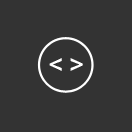
<style>
.page{position:relative;width:132px;height:132px;background:#333333}
.page>*{position:absolute;margin:0}
.t1{font:25.6px "HelveticaNeue-Medium";color:#ffffff;scale:0.94 1}
</style>
<div class="page">
<p class="t1" style="left:49px;top:58px;width:34px;height:13px">&lt; &gt;</p>
</div>
